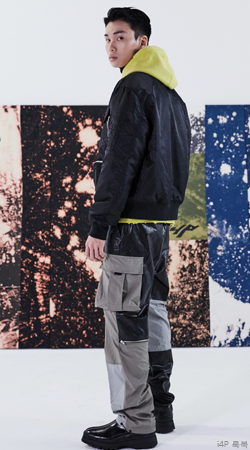
<style>
.page{position:relative;width:250px;height:450px}
.page>*{position:absolute;margin:0}
.t1{font:7.6px "MalgunGothicRegular";color:#929292;scale:1.11 1}
</style>
<div class="page">
<p class="t1" style="left:217px;top:441px;width:32px;height:8px">i4P 룩북</p>
</div>
